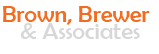
<style>
.page{position:relative;width:159px;height:54px;background:#ffffff}
.page>*{position:absolute;margin:0}
.t1{font:24px "BerlinSansFB-Reg";color:#f36c20}
.t2{font:24px "BerlinSansFB-Reg";color:#d7d7d7}
</style>
<div class="page">
<p class="t1" style="left:3px;top:6px;width:147px;height:19px">Brown, Brewer</p>
<p class="t2" style="left:20px;top:23px;width:120px;height:16px">&amp; Associates</p>
</div>
